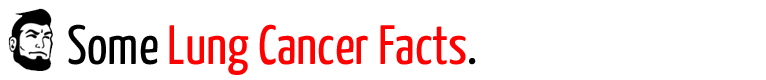
<style>
.page{position:relative;width:766px;height:80px;background:#ffffff}
.page>*{position:absolute;margin:0}
.t1{font:55.3px "YanoneKaffeesatz-Regular";color:#ff0000}
.t2{font:55.3px "YanoneKaffeesatz-Regular";color:#000000}
</style>
<div class="page">
<p class="t1" style="left:68px;top:24px;width:408px;height:51px"><span class="t2">Some </span>Lung Cancer Facts<span class="t2">.</span></p>
</div>
